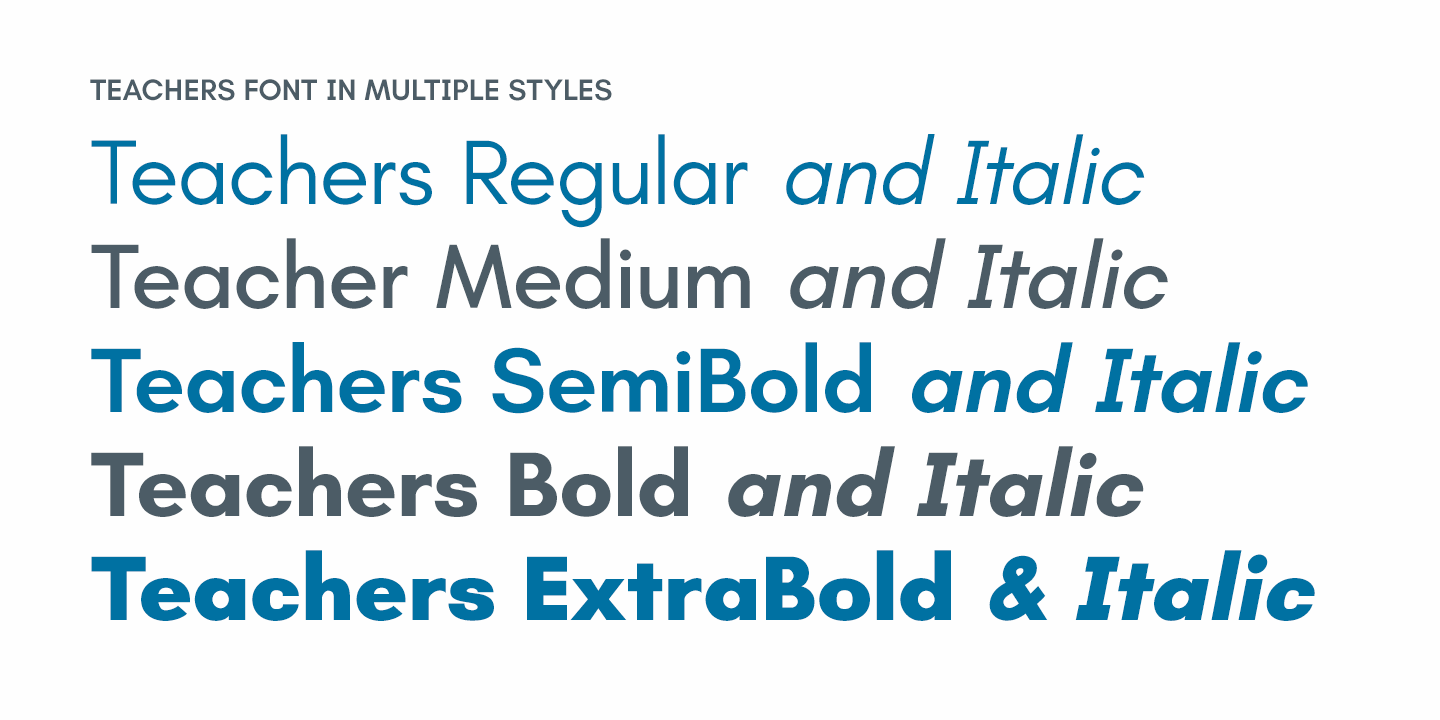
<style>
.page{position:relative;width:1440px;height:720px;background:#fefefe}
.page>*{position:absolute;margin:0}
.t1{font:30px/84px "Teachers-SemiBold";color:#4c5c66;text-transform:uppercase}
.t2{font:93px/104px "Teachers-Regular";color:#0071a2}
.t3{font:93px/104px "Teachers-Italic";color:#0071a2}
.t4{font:93px/104px "Teachers-Medium";color:#4c5c66}
.t5{font:93px/104px "Teachers-MediumItalic";color:#4c5c66}
.t6{font:93px/104px "Teachers-SemiBold";color:#0071a2}
.t7{font:93px/104px "Teachers-SemiBoldItalic";color:#0071a2}
.t8{font:93px/104px "Teachers-Bold";color:#4c5c66}
.t9{font:93px/104px "Teachers-BoldItalic";color:#4c5c66}
.t10{font:93px/104px "Teachers-ExtraBold";color:#0071a2}
.t11{font:93px/104px "Teachers-ExtraBoldItalic";color:#0071a2}
</style>
<div class="page">
<p class="t1" style="left:90px;top:79px;width:1225px;height:542px">Teachers Font in Multiple Styles<br><span class="t2">Teachers Regular </span><span class="t3">and Italic<br></span><span class="t4">Teacher Medium </span><span class="t5">and Italic<br></span><span class="t6">Teachers SemiBold</span><span class="t7"> and Italic<br></span><span class="t8">Teachers Bold </span><span class="t9">and Italic<br></span><span class="t10">Teachers ExtraBold </span><span class="t11">&amp; Italic</span></p>
</div>
